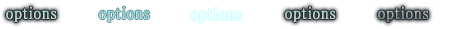
<style>
.page{position:relative;width:465px;height:29px;background:#ffffff}
.page>*{position:absolute;margin:0}
.t1{font:18.1px "MS-PMincho";letter-spacing:0.03em;color:#b9dfe0;font-weight:bold;scale:0.84 1}
</style>
<div class="page">
<p class="t1" style="left:6px;top:6px;width:51px;height:16px">options</p>
<p class="t1" style="left:285px;top:6px;width:51px;height:16px">options</p>
</div>
